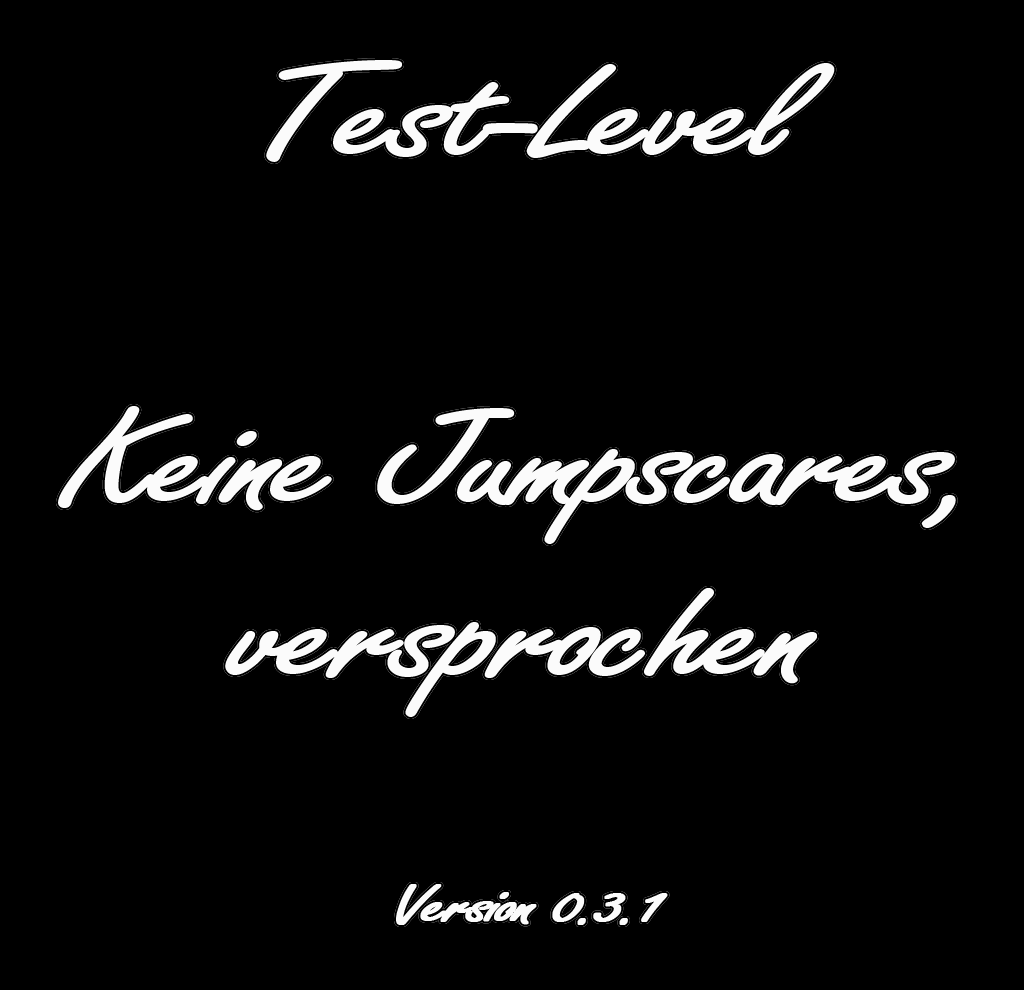
<style>
.page{position:relative;width:1024px;height:990px;background:#000000}
.page>*{position:absolute;margin:0}
.t1{font:144.5px "FreestyleScript-Regular";letter-spacing:-0.06em;color:#fbfbfb;font-weight:bold;scale:1.51 1}
.t2{font:57.8px "FreestyleScript-Regular";letter-spacing:-0.06em;color:#fbfbfb;font-weight:bold;scale:1.51 1}
</style>
<div class="page">
<p class="t1" style="left:58px;top:60px;width:898px;height:865px;text-align:center">Test-Level<br><br>Keine Jumpscares,<br>versprochen<br><br><span class="t2">Version 0.3.1</span></p>
<p class="t1" style="left:58px;top:60px;width:898px;height:865px;text-align:center">Test-Level<br><br>Keine Jumpscares,<br>versprochen<br><br><span class="t2">Version 0.3.1</span></p>
</div>
